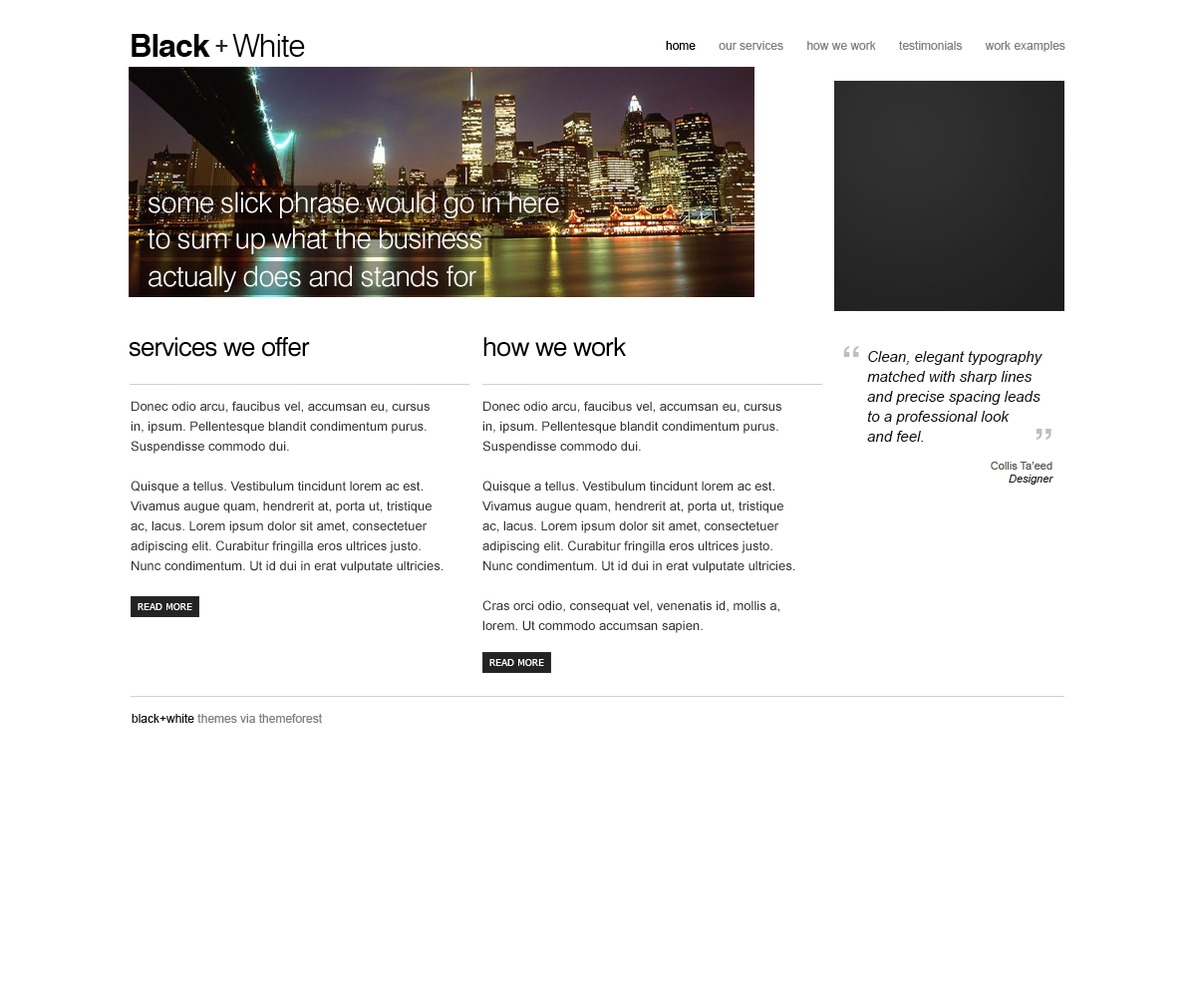
<style>
.page{position:relative;width:1196px;height:997px;background:#ffffff}
.page>*{position:absolute;margin:0}
.t1{font:31.7px "Swiss721BT-Bold";letter-spacing:-0.03em;color:#000000}
.t2{font:31.7px "Swiss721BT-Light";letter-spacing:-0.03em;color:#000000}
.t3{font:19.9px "Swiss721BT-Heavy";color:#262626}
.t4{font:12px "ArialMT";color:#7e7e7e}
.t5{font:12px "ArialMT";color:#000000}
.t6{font:28.2px "Swiss721BT-Light";letter-spacing:-0.02em;color:#ffffff}
.t7{font:25.9px "Swiss721BT-Roman";letter-spacing:-0.03em;color:#000000}
.t8{font:39.9px "Helvetica-Bold";color:#bfbfbf}
.t9{font:15px/19.9px "Arial-ItalicMT";color:#0e0e0e}
.t10{font:13px/19.9px "ArialMT";color:#353535}
.t11{font:11px "ArialMT";color:#54534a}
.t12{font:11px "Arial-ItalicMT";color:#1d1d1d}
.t13{font:9px "Verdana";color:#ffffff;text-transform:uppercase}
.t14{font:12px "ArialMT";color:#0e0d0d}
</style>
<div class="page">
<p class="t1" style="left:132px;top:34px;width:173px;height:23px">Black   <span class="t2">White</span></p>
<p class="t3" style="left:215px;top:40px;width:13px;height:12px">+</p>
<p class="t4" style="left:666px;top:41px;width:400px;height:11px"><span class="t5">home       </span>our services       how we work       testimonials       work examples</p>
<p class="t6" style="left:149px;top:191px;width:410px;height:27px">some slick phrase would go in here</p>
<p class="t6" style="left:148px;top:227px;width:333px;height:27px">to sum up what the business</p>
<p class="t6" style="left:149px;top:265px;width:327px;height:27px">actually does and stands for</p>
<p class="t7" style="left:129px;top:337px;width:181px;height:20px">services we offer</p>
<p class="t7" style="left:483px;top:337px;width:143px;height:20px">how we work</p>
<p class="t8" style="left:843px;top:346px;width:16px;height:11px">“</p>
<p class="t9" style="left:867px;top:351px;width:176px;height:91px">Clean, elegant typography<br>matched with sharp lines<br>and precise spacing leads<br>to a professional look<br>and feel.</p>
<p class="t10" style="left:131px;top:401px;width:313px;height:172px">Donec odio arcu, faucibus vel, accumsan eu, cursus in, ipsum. Pellentesque blandit condimentum purus. Suspendisse commodo dui. <br><br>Quisque a tellus. Vestibulum tincidunt lorem ac est. Vivamus augue quam, hendrerit at, porta ut, tristique ac, lacus. Lorem ipsum dolor sit amet, consectetuer adipiscing elit. Curabitur fringilla eros ultrices justo. Nunc condimentum. Ut id dui in erat vulputate ultricies.</p>
<p class="t10" style="left:482px;top:401px;width:313px;height:232px">Donec odio arcu, faucibus vel, accumsan eu, cursus in, ipsum. Pellentesque blandit condimentum purus. Suspendisse commodo dui. <br><br>Quisque a tellus. Vestibulum tincidunt lorem ac est. Vivamus augue quam, hendrerit at, porta ut, tristique ac, lacus. Lorem ipsum dolor sit amet, consectetuer adipiscing elit. Curabitur fringilla eros ultrices justo. Nunc condimentum. Ut id dui in erat vulputate ultricies.<br><br>Cras orci odio, consequat vel, venenatis id, mollis a, lorem. Ut commodo accumsan sapien.</p>
<p class="t8" style="left:1036px;top:429px;width:16px;height:11px">”</p>
<p class="t11" style="left:991px;top:462px;width:63px;height:22px;text-align:right">Collis Ta’eed<br><span class="t12">Designer</span></p>
<p class="t13" style="left:138px;top:603px;width:54px;height:7px">Read More</p>
<p class="t13" style="left:489px;top:659px;width:55px;height:7px">Read More</p>
<p class="t4" style="left:132px;top:714px;width:190px;height:9px"><span class="t14">black+white</span> themes via themeforest</p>
</div>
